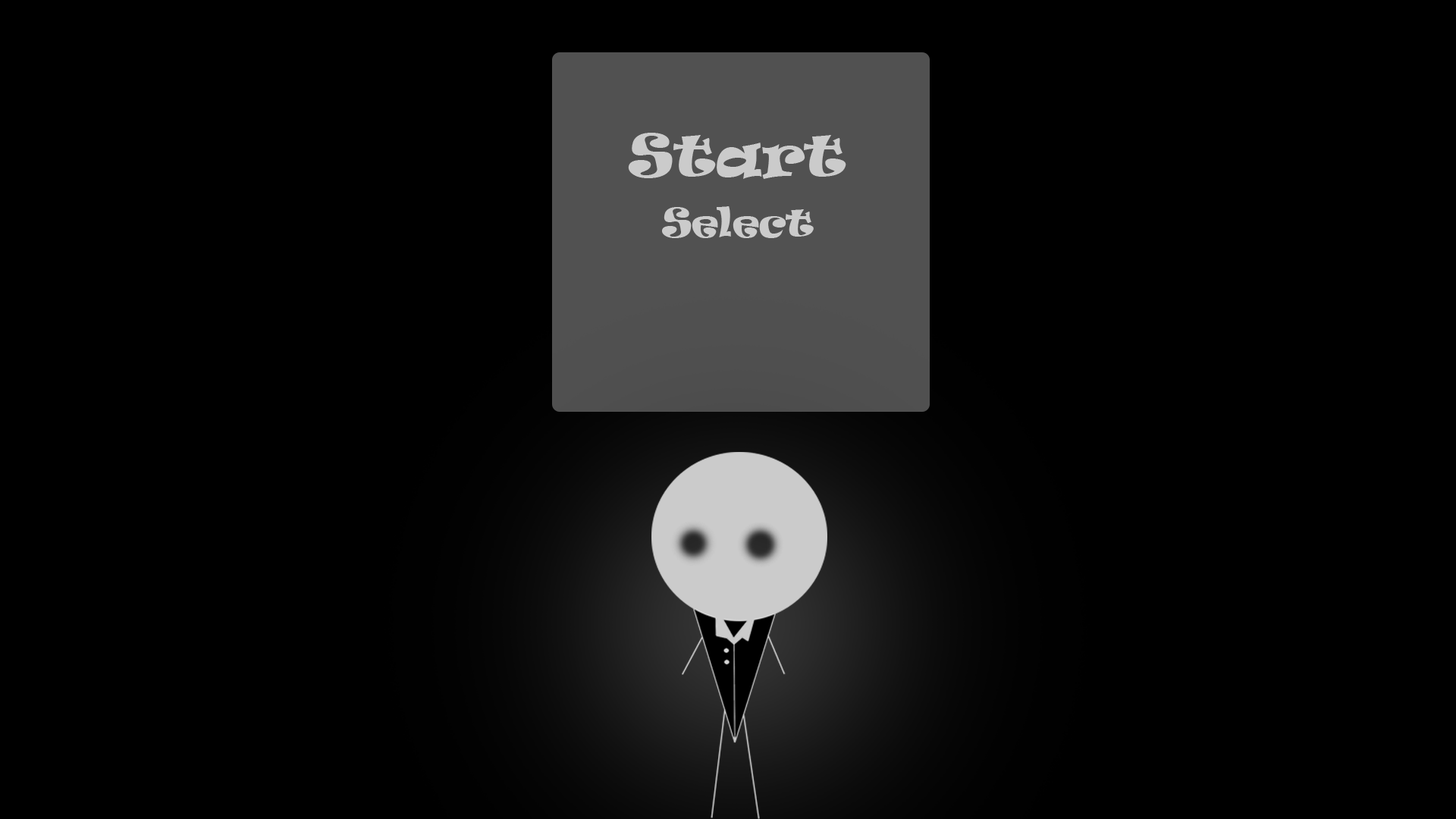
<style>
.page{position:relative;width:1456px;height:819px;background:#000000}
.page>*{position:absolute;margin:0}
.t1{font:54.6px "Ravie";color:#cbcbcb}
.t2{font:36.4px "Ravie";color:#cbcbcb}
</style>
<div class="page">
<p class="t1" style="left:628px;top:133px;width:218px;height:46px">Start</p>
<p class="t2" style="left:662px;top:206px;width:152px;height:32px">Select</p>
</div>
